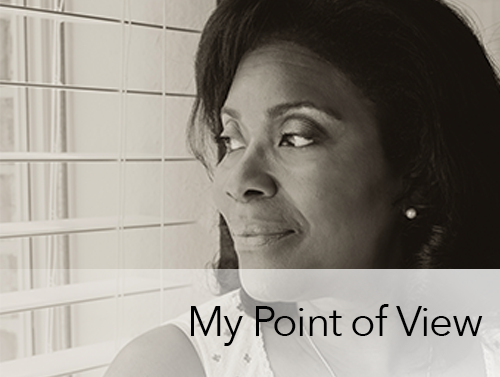
<style>
.page{position:relative;width:500px;height:377px}
.page>*{position:absolute;margin:0}
.t1{font:41.7px "AvenirNext-Regular";letter-spacing:-0.025em;color:#000000}
</style>
<div class="page">
<p class="t1" style="left:191px;top:304px;width:292px;height:42px">My Point of View</p>
</div>
